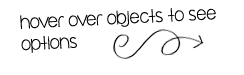
<style>
.page{position:relative;width:244px;height:75px;background:#ffffff}
.page>*{position:absolute;margin:0}
.t1{font:18px "cafbrewery";color:#000000}
</style>
<div class="page">
<p class="t1" style="left:20px;top:8px;width:196px;height:45px;rotate:-3deg">hover over objects to see <br>options</p>
</div>
